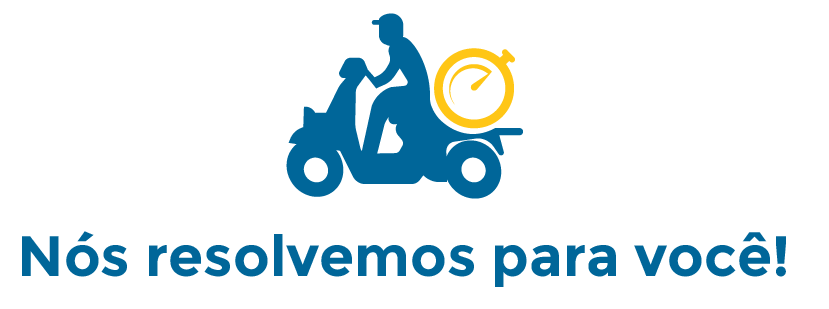
<style>
.page{position:relative;width:829px;height:309px;background:#ffffff}
.page>*{position:absolute;margin:0}
.t1{font:56.7px "Montserrat-Bold";color:#006699}
</style>
<div class="page">
<p class="t1" style="left:22px;top:231px;width:764px;height:56px">Nós resolvemos para você!</p>
</div>
